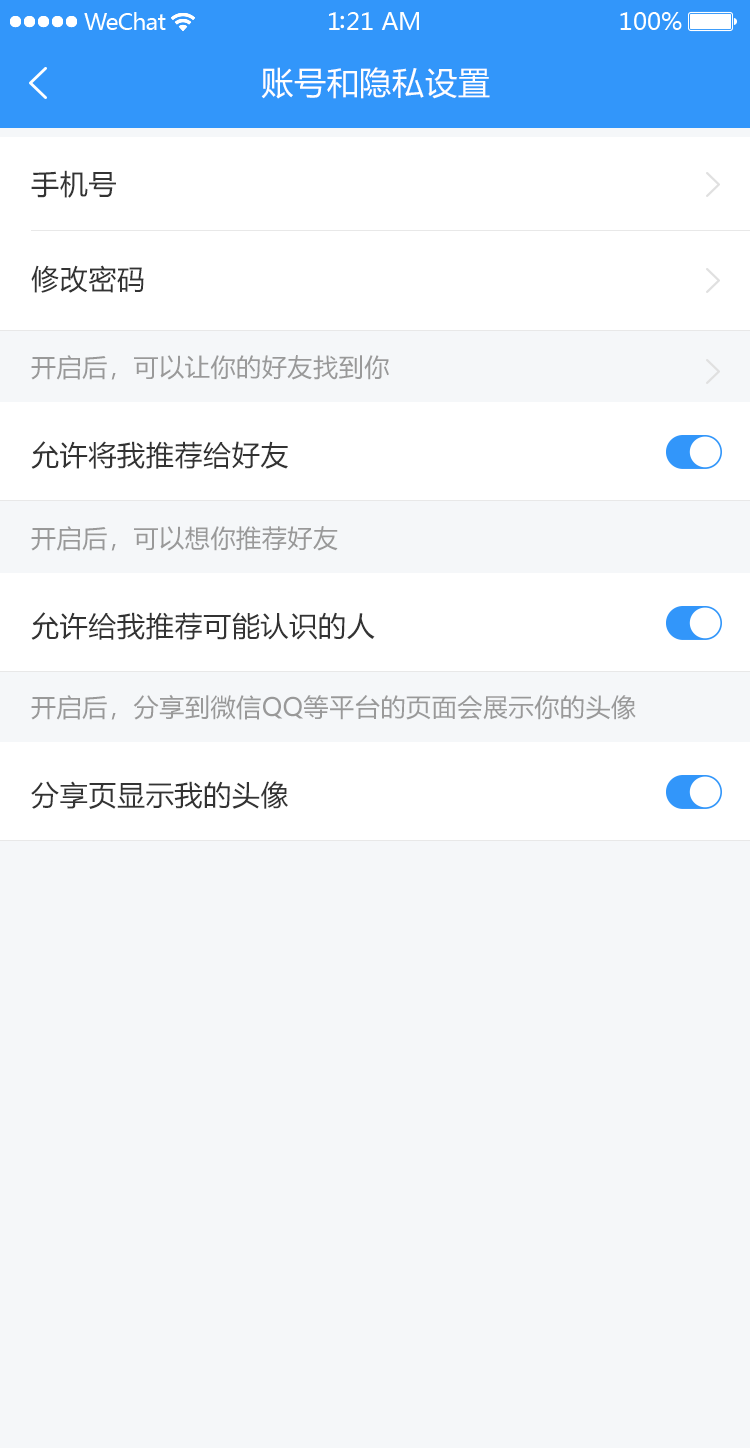
<style>
.page{position:relative;width:750px;height:1448px;background:#f5f7f9}
.page>*{position:absolute;margin:0}
.t1{font:32px "MicrosoftYaHei";letter-spacing:0.025em;color:#ffffff}
.t2{font:28px "MicrosoftYaHei";letter-spacing:0.025em;color:#333333}
.t3{font:25px "MicrosoftYaHei";letter-spacing:0.025em;color:#999999}
</style>
<div class="page">
<p class="t1" style="left:261px;top:67px;width:229px;height:32px">账号和隐私设置</p>
<p class="t2" style="left:31px;top:170px;width:85px;height:28px">手机号</p>
<p class="t2" style="left:31px;top:265px;width:113px;height:28px">修改密码</p>
<p class="t3" style="left:31px;top:355px;width:358px;height:25px">开启后，可以让你的好友找到你</p>
<p class="t2" style="left:31px;top:441px;width:257px;height:28px">允许将我推荐给好友</p>
<p class="t3" style="left:31px;top:526px;width:307px;height:25px">开启后，可以想你推荐好友</p>
<p class="t2" style="left:31px;top:612px;width:344px;height:28px">允许给我推荐可能认识的人</p>
<p class="t3" style="left:31px;top:694px;width:605px;height:26px">开启后，分享到微信QQ等平台的页面会展示你的头像</p>
<p class="t2" style="left:31px;top:781px;width:257px;height:28px">分享页显示我的头像</p>
</div>
